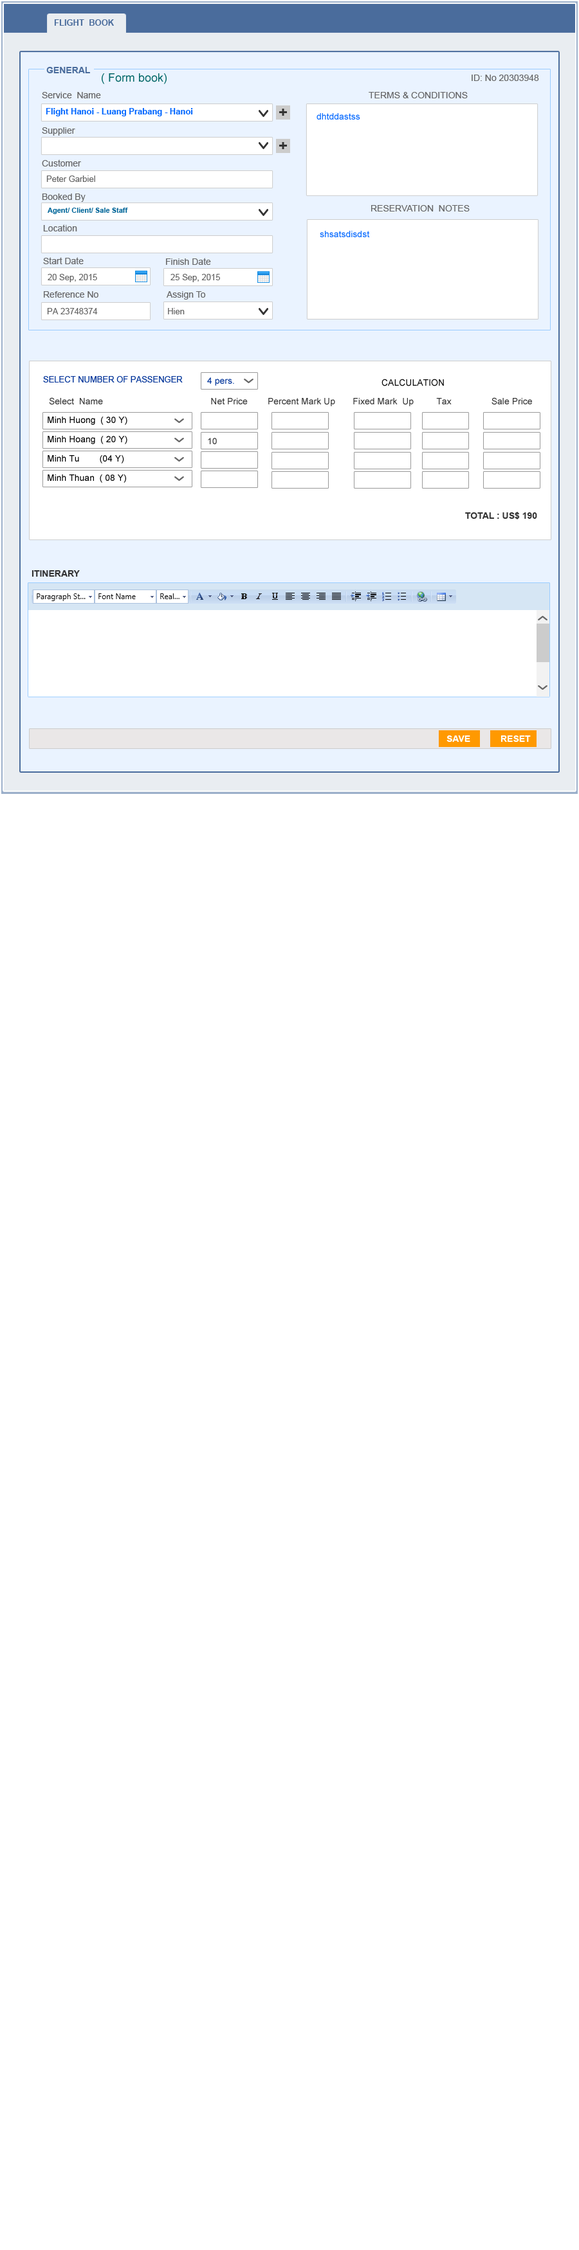
<style>
.page{position:relative;width:579px;height:2250px;background:#ffffff}
.page>*{position:absolute;margin:0}
.t1{font:8.4px "Arial-BoldMT";color:#4a6c9c}
.t2{font:9px "Arial-BoldMT";color:#4a6c9c}
.t3{font:11.6px "ArialMT";color:#006666}
.t4{font:9px "ArialMT";color:#666666}
.t5{font:8.4px "Arial-BoldMT";color:#0066ff}
.t6{font:15.4px "Arial-BoldMT";color:#333333}
.t7{font:9px "ArialMT";color:#0066ff}
.t8{font:8.4px "ArialMT";color:#666666}
.t9{font:7.1px "Arial-BoldMT";color:#006699}
.t10{font:8.4px "ArialMT";color:#003399}
.t11{font:9px "ArialMT";color:#003399}
.t12{font:9px "ArialMT";color:#000000}
.t13{font:9px "ArialMT";color:#333333}
.t14{font:9px/19.3px "ArialMT";color:#000000}
.t15{font:9px "Arial-BoldMT";color:#333333}
.t16{font:9px "Arial-BoldMT";color:#ffffff}
</style>
<div class="page">
<p class="t1" style="left:54px;top:19px;width:60px;height:7px">FLIGHT  BOOK</p>
<p class="t2" style="left:46px;top:67px;width:44px;height:6px">GENERAL</p>
<p class="t3" style="left:102px;top:73px;width:64px;height:11px">( Form book)</p>
<p class="t4" style="left:471px;top:75px;width:68px;height:6px">ID: No 20303948</p>
<p class="t4" style="left:42px;top:92px;width:59px;height:6px">Service  Name</p>
<p class="t4" style="left:368px;top:92px;width:99px;height:6px">TERMS &amp; CONDITIONS</p>
<p class="t5" style="left:46px;top:108px;width:147px;height:8px">Flight Hanoi - Luang Prabang - Hanoi</p>
<p class="t6" style="left:279px;top:109px;width:8px;height:7px">+</p>
<p class="t7" style="left:316px;top:113px;width:44px;height:7px">dhtddastss</p>
<p class="t4" style="left:42px;top:127px;width:33px;height:9px">Supplier</p>
<p class="t6" style="left:279px;top:142px;width:8px;height:7px">+</p>
<p class="t4" style="left:42px;top:159px;width:39px;height:7px">Customer</p>
<p class="t8" style="left:46px;top:176px;width:49px;height:6px">Peter Garbiel</p>
<p class="t4" style="left:42px;top:194px;width:44px;height:8px">Booked By</p>
<p class="t9" style="left:48px;top:208px;width:80px;height:6px">Agent/ Client/ Sale Staff</p>
<p class="t4" style="left:371px;top:205px;width:98px;height:7px">RESERVATION  NOTES</p>
<p class="t4" style="left:43px;top:224px;width:34px;height:7px">Location</p>
<p class="t7" style="left:320px;top:231px;width:50px;height:6px">shsatsdisdst</p>
<p class="t4" style="left:43px;top:257px;width:41px;height:7px">Start Date</p>
<p class="t4" style="left:166px;top:258px;width:45px;height:7px">Finish Date</p>
<p class="t8" style="left:48px;top:274px;width:172px;height:8px">20 Sep, 2015                        25 Sep, 2015</p>
<p class="t4" style="left:44px;top:291px;width:54px;height:7px">Reference No</p>
<p class="t4" style="left:166px;top:291px;width:40px;height:9px">Assign To</p>
<p class="t8" style="left:47px;top:308px;width:137px;height:6px">PA 23748374                              Hien</p>
<p class="t10" style="left:43px;top:376px;width:140px;height:6px">SELECT NUMBER OF PASSENGER</p>
<p class="t11" style="left:207px;top:377px;width:27px;height:9px">4 pers.</p>
<p class="t12" style="left:381px;top:379px;width:63px;height:7px">CALCULATION</p>
<p class="t13" style="left:49px;top:397px;width:483px;height:9px">Select  Name                                           Net Price        Percent Mark Up       Fixed Mark  Up         Tax                Sale Price</p>
<p class="t14" style="left:48px;top:417px;width:79px;height:66px">Minh Huong  ( 30 Y)<br>Minh Hoang  ( 20 Y)<br>Minh Tu        (04 Y)<br>Minh Thuan  ( 08 Y)</p>
<p class="t13" style="left:208px;top:438px;width:9px;height:6px">10</p>
<p class="t15" style="left:465px;top:512px;width:72px;height:7px">TOTAL : US$ 190</p>
<p class="t15" style="left:32px;top:570px;width:48px;height:7px">ITINERARY</p>
<p class="t16" style="left:446px;top:735px;width:24px;height:7px">SAVE</p>
<p class="t16" style="left:500px;top:735px;width:30px;height:7px">RESET</p>
</div>
